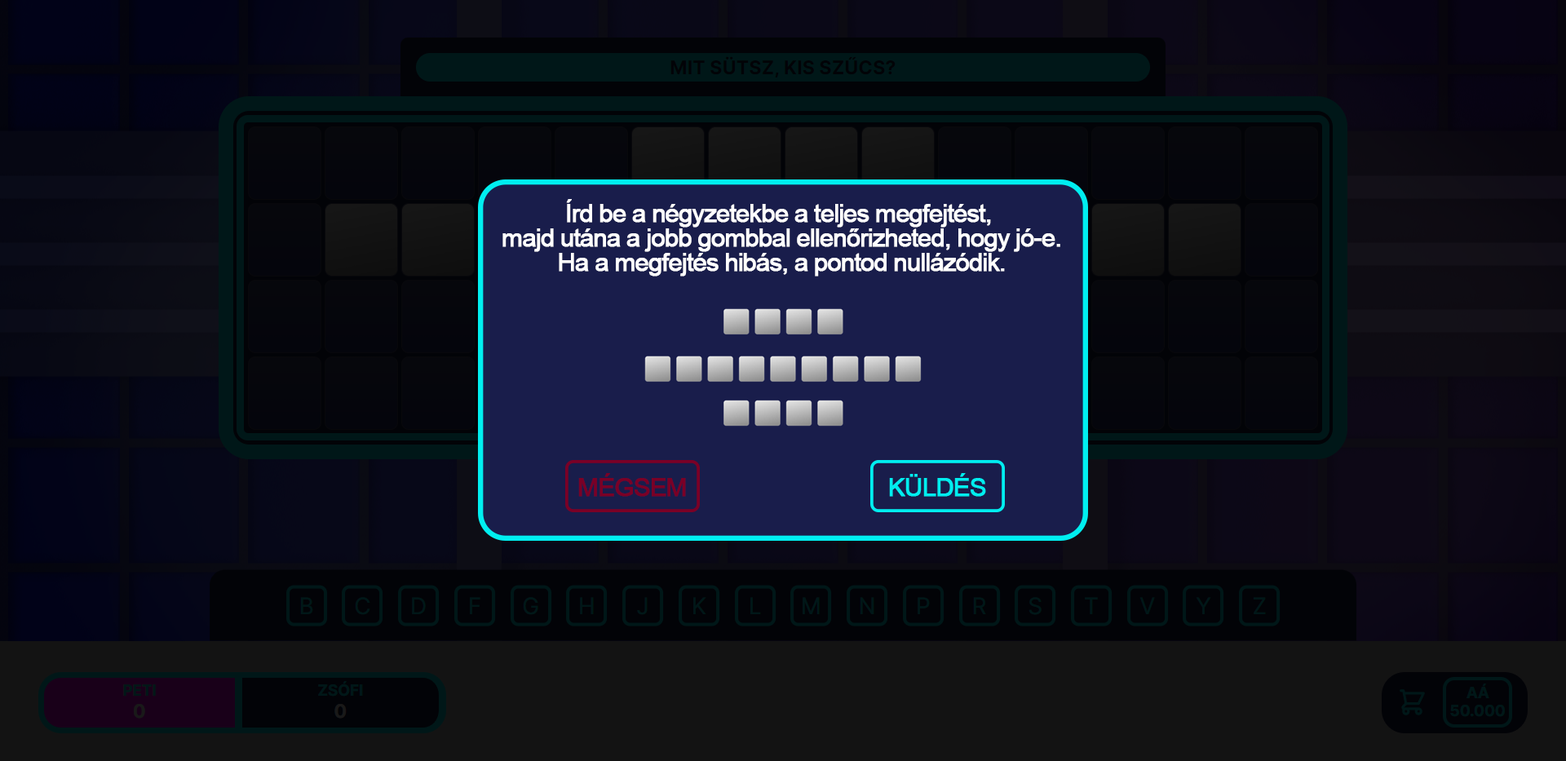
<style>
.page{position:relative;width:1566px;height:761px}
.page>*{position:absolute;margin:0}
.t1{font:25.7px/24.5px "ArialMT";letter-spacing:-0.06em;color:#ffffff;font-weight:bold}
.t2{font:25.7px "ArialMT";letter-spacing:-0.06em;color:#7a0026;font-weight:bold}
.t3{font:25.7px "ArialMT";letter-spacing:-0.06em;color:#00eef0;font-weight:bold}
</style>
<div class="page">
<p class="t1" style="left:503px;top:199px;width:558px;height:78px;text-align:center">Írd be a négyzetekbe a teljes megfejtést, <br>majd utána a jobb gombbal ellenőrizheted, hogy jó-e.<br>Ha a megfejtés hibás, a pontod nullázódik.</p>
<p class="t2" style="left:578px;top:473px;width:108px;height:24px">MÉGSEM</p>
<p class="t3" style="left:889px;top:473px;width:97px;height:24px">KÜLDÉS</p>
</div>
